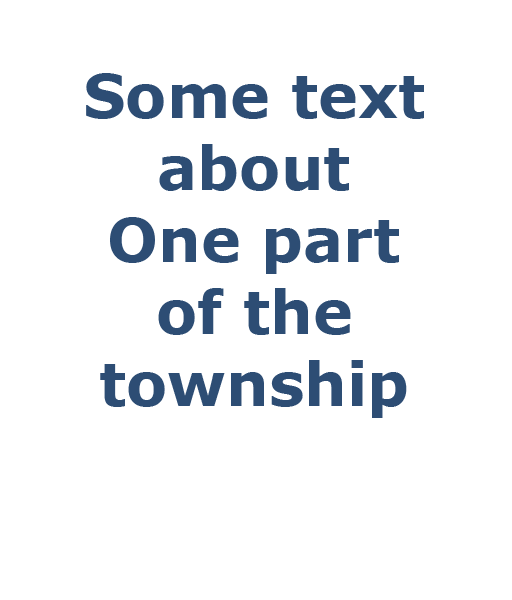
<style>
.page{position:relative;width:512px;height:600px;background:#ffffff}
.page>*{position:absolute;margin:0}
.t1{font:60px "Verdana-Bold";color:#2d4d74}
</style>
<div class="page">
<p class="t1" style="left:86px;top:73px;width:338px;height:345px;text-align:center">Some text<br>about<br>One part<br>of the <br>township</p>
</div>
